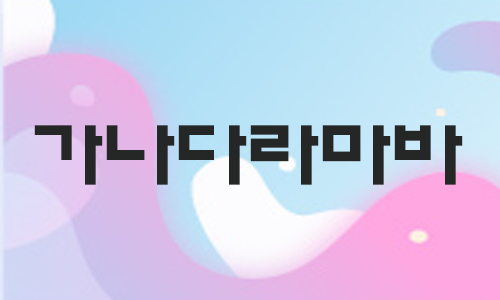
<style>
.page{position:relative;width:500px;height:300px}
.page>*{position:absolute;margin:0}
.t1{font:72px "HYtbrB";color:#252626}
</style>
<div class="page">
<p class="t1" style="left:34px;top:125px;width:429px;height:60px">가나다라마바</p>
</div>
